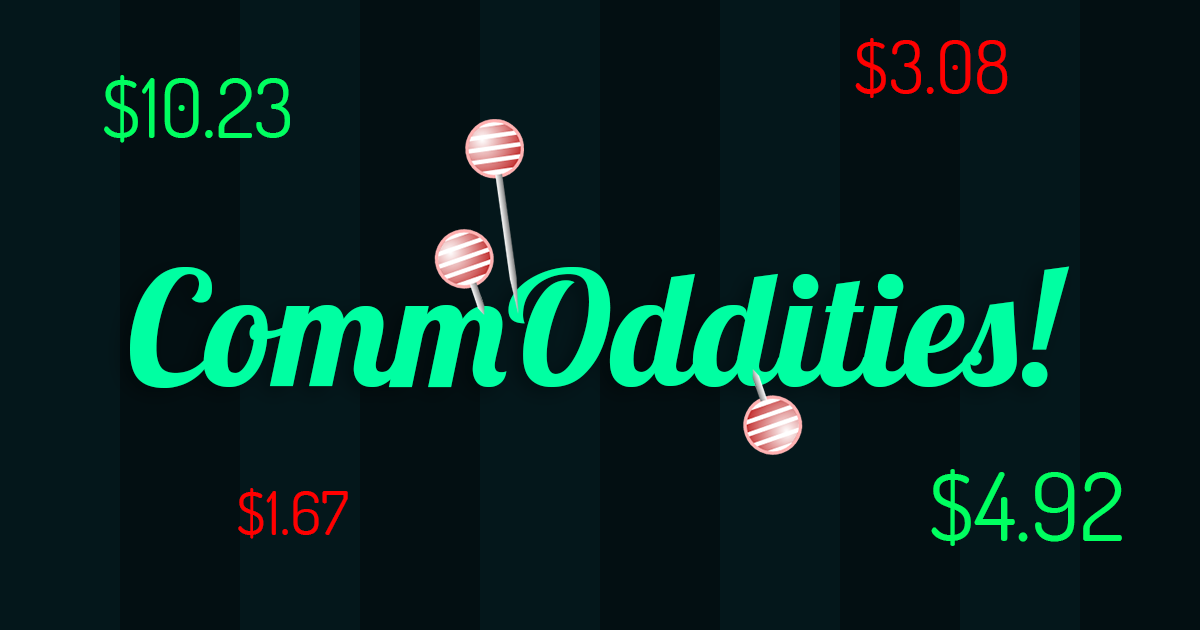
<style>
.page{position:relative;width:1200px;height:630px;background:#030f12}
.page>*{position:absolute;margin:0}
.t1{font:72.1px "Dosis-Regular";color:#ff0000}
.t2{font:80.6px "Dosis-Regular";color:#00ff60}
.t3{font:159px "Lobster-Regular";color:#00ffa2}
.t4{font:93.7px "Dosis-Regular";color:#00ff60}
.t5{font:60.5px "Dosis-Regular";color:#ff0000}
</style>
<div class="page">
<p class="t1" style="left:855px;top:38px;width:153px;height:60px">$3.08</p>
<p class="t2" style="left:104px;top:75px;width:186px;height:68px">$10.23</p>
<p class="t3" style="left:130px;top:266px;width:940px;height:122px">CommOddities!</p>
<p class="t4" style="left:931px;top:469px;width:191px;height:77px">$4.92</p>
<p class="t5" style="left:238px;top:488px;width:110px;height:51px">$1.67</p>
</div>
